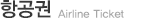
<style>
.page{position:relative;width:151px;height:18px;background:#ffffff}
.page>*{position:absolute;margin:0}
.t1{font:20px "YDIWebYGO140";letter-spacing:-0.025em;color:#393939;scale:0.95 1}
.t2{font:11px "YDIWebYGO140";color:#a7a7a7}
</style>
<div class="page">
<p class="t1" style="left:0px;top:0px;width:51px;height:18px">항공권</p>
<p class="t2" style="left:58px;top:9px;width:66px;height:9px">Airline Ticket</p>
</div>
